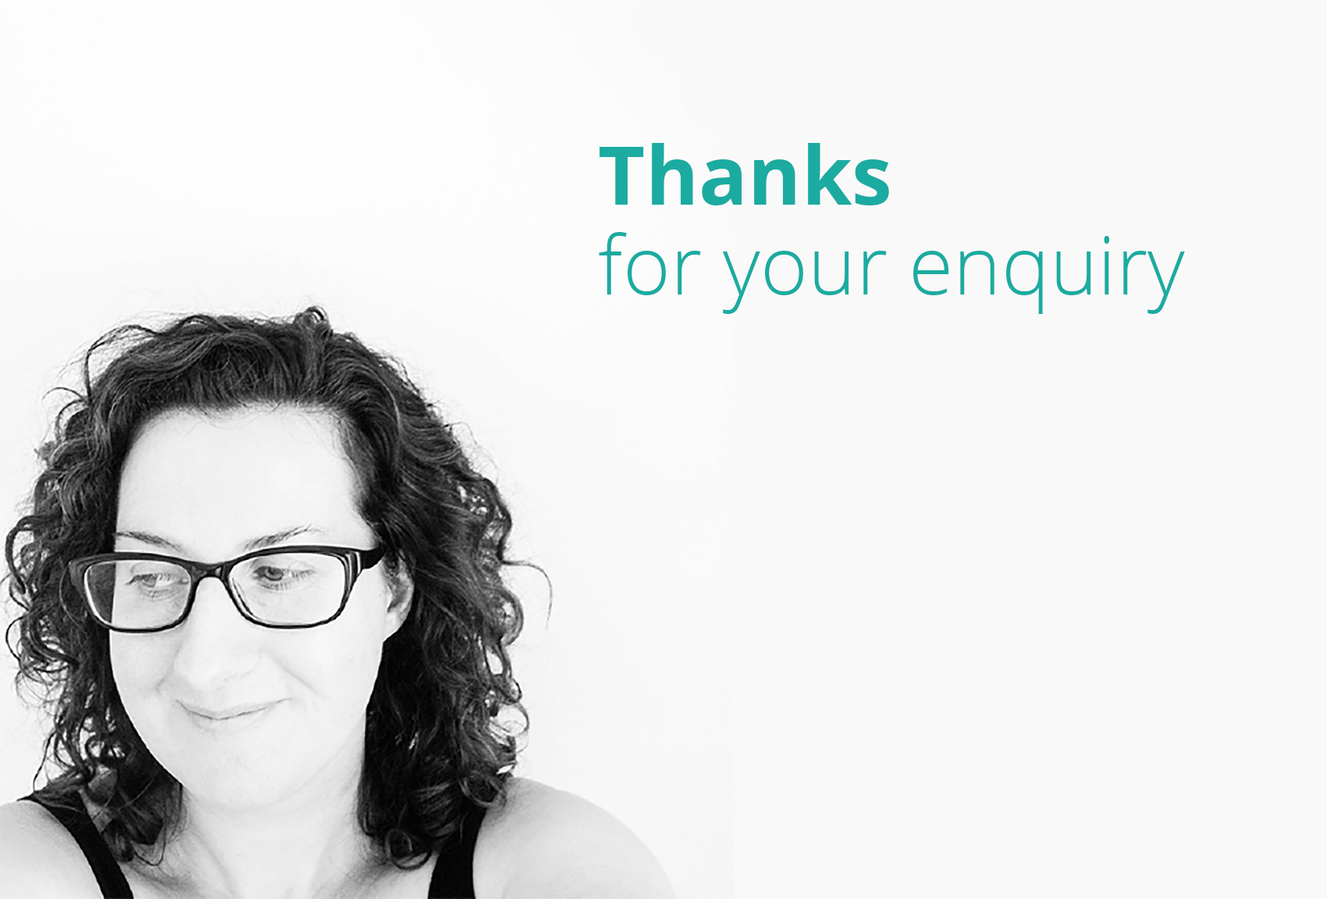
<style>
.page{position:relative;width:1327px;height:899px;background:#f9f9f9}
.page>*{position:absolute;margin:0}
.t1{font:81.3px/89.4px "OpenSans-Light";color:#1baba1}
.t2{font:81.3px/89.4px "OpenSans-Bold";color:#1baba1}
</style>
<div class="page">
<p class="t1" style="left:599px;top:143px;width:586px;height:171px"><span class="t2">Thanks</span> <br>for your enquiry</p>
</div>
